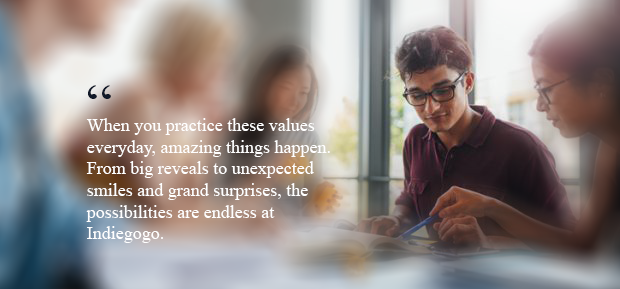
<style>
.page{position:relative;width:620px;height:289px}
.page>*{position:absolute;margin:0}
.t1{font:60px "TimesNewRomanPSMT";color:#101828}
.t2{font:18px "TimesNewRomanPSMT";color:#ffffff}
</style>
<div class="page">
<p class="t1" style="left:88px;top:85px;width:23px;height:14px">“</p>
<p class="t2" style="left:86px;top:118px;width:244px;height:125px">When you practice these values everyday, amazing things happen. From big reveals to unexpected smiles and grand surprises, the possibilities are endless at Indiegogo.</p>
</div>
